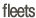
<style>
.page{position:relative;width:36px;height:18px;background:#ffffff}
.page>*{position:absolute;margin:0}
.t1{font:16.4px "GothicMB101Pro-Regular";letter-spacing:-0.08em;color:#4c4842;font-weight:bold;scale:0.77 1}
</style>
<div class="page">
<p class="t1" style="left:2px;top:3px;width:33px;height:15px">fleets</p>
</div>
